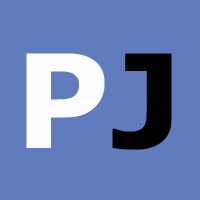
<style>
.page{position:relative;width:200px;height:200px;background:#617cbe}
.page>*{position:absolute;margin:0}
.t1{font:130px "Verdana-Bold";color:#fefeff}
.t2{font:130px "Verdana-Bold";color:#000000}
</style>
<div class="page">
<p class="t1" style="left:26px;top:53px;width:146px;height:97px">P<span class="t2">J</span></p>
</div>
